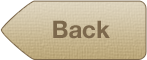
<style>
.page{position:relative;width:147px;height:60px}
.page>*{position:absolute;margin:0}
.t1{font:24px "HelveticaNeue-Bold";color:#7c684c}
</style>
<div class="page">
<p class="t1" style="left:53px;top:20px;width:57px;height:19px">Back</p>
</div>
